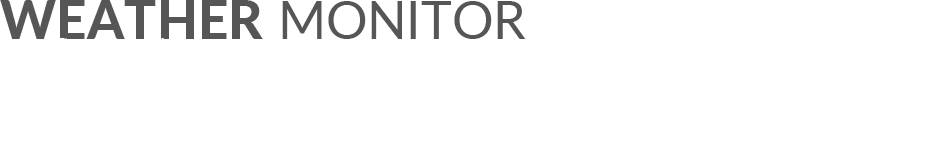
<style>
.page{position:relative;width:945px;height:150px;background:#ffffff}
.page>*{position:absolute;margin:0}
.t1{font:53.3px "Lato-Heavy";color:#565656}
.t2{font:51.7px "Lato-Regular";color:#565656}
</style>
<div class="page">
<p class="t1" style="left:0px;top:0px;width:263px;height:39px">WEATHER</p>
<p class="t2" style="left:282px;top:1px;width:244px;height:38px">MONITOR</p>
</div>
